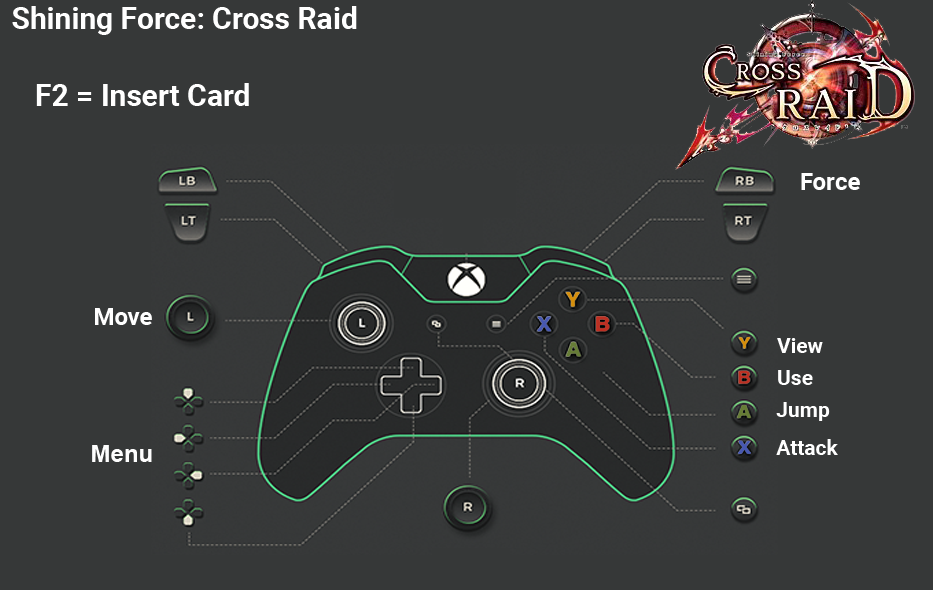
<style>
.page{position:relative;width:933px;height:590px;background:#363838}
.page>*{position:absolute;margin:0}
.t1{font:30px "Roboto-Bold";color:#ffffff}
.t2{font:24px "Roboto-Bold";color:#ffffff}
.t3{font:21px "Roboto-Bold";color:#ffffff}
.t4{font:24px "Arial-BoldMT";color:#fefefe}
</style>
<div class="page">
<p class="t1" style="left:12px;top:6px;width:345px;height:29px">Shining Force: Cross Raid</p>
<p class="t1" style="left:36px;top:83px;width:213px;height:23px">F2 = Insert Card</p>
<p class="t2" style="left:801px;top:173px;width:59px;height:17px">Force</p>
<p class="t2" style="left:95px;top:308px;width:57px;height:17px">Move</p>
<p class="t3" style="left:777px;top:338px;width:46px;height:15px">View</p>
<p class="t3" style="left:778px;top:370px;width:35px;height:15px">Use</p>
<p class="t3" style="left:776px;top:402px;width:54px;height:19px">Jump</p>
<p class="t4" style="left:92px;top:445px;width:60px;height:17px">Menu</p>
<p class="t3" style="left:776px;top:439px;width:62px;height:16px">Attack</p>
</div>
